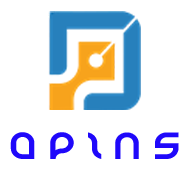
<style>
.page{position:relative;width:185px;height:185px;background:#ffffff}
.page>*{position:absolute;margin:0}
.t1{font:30.1px "JeckleRegular";color:#1f08fa;scale:1.11 1}
</style>
<div class="page">
<p class="t1" style="left:10px;top:132px;width:169px;height:27px">A P I N S</p>
</div>
